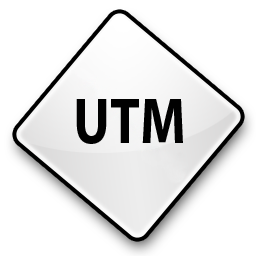
<style>
.page{position:relative;width:256px;height:256px;background:#ffffff}
.page>*{position:absolute;margin:0}
.t1{font:66px "MyriadPro-Bold";letter-spacing:0.005em;color:#010101;scale:0.82 1}
</style>
<div class="page">
<p class="t1" style="left:76px;top:99px;width:107px;height:45px">UTM</p>
</div>
